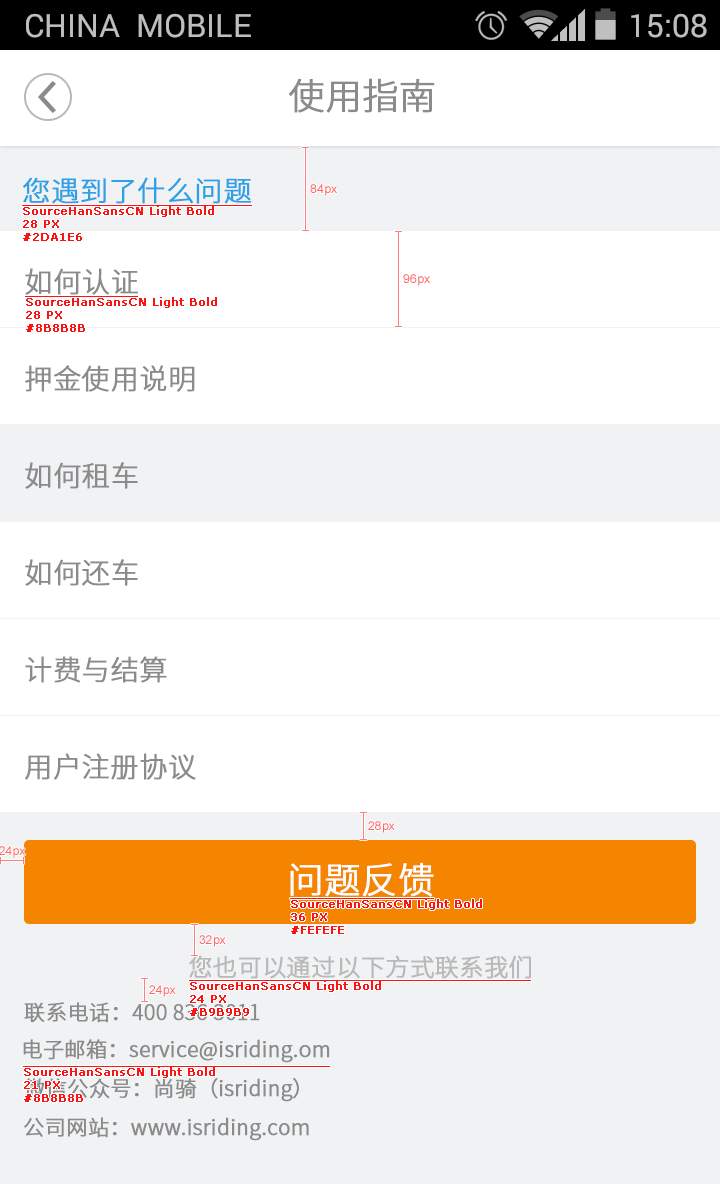
<style>
.page{position:relative;width:720px;height:1184px;background:#ffffff}
.page>*{position:absolute;margin:0}
.t1{font:30px "SourceHanSansCN-Light";font-weight:bold}
.t2{font:36px "SourceHanSansCN-Light";color:#8b8b8b;font-weight:bold}
.t3{font:28px "SourceHanSansCN-Light";color:#2da1e6;font-weight:bold}
.t4{font:11px "Verdana";color:#fc1313;font-weight:bold}
.t5{font:28px "SourceHanSansCN-Light";color:#8b8b8b;font-weight:bold}
.t6{font:36px "SourceHanSansCN-Light";color:#fefefe;font-weight:bold}
.t7{font:24px "SourceHanSansCN-Light";color:#b9b9b9;font-weight:bold}
.t8{font:21px "SourceHanSansCN-Light";color:#8b8b8b;font-weight:bold}
</style>
<div class="page">
<p class="t1" style="left:631px;top:13px;width:73px;height:24px">15:08</p>
<p class="t2" style="left:288px;top:78px;width:147px;height:35px">使用指南</p>
<p class="t3" style="left:22px;top:177px;width:230px;height:27px">您遇到了什么问题</p>
<p class="t4" style="left:23px;top:206px;width:191px;height:35px">SourceHanSansCN Light Bold<br>28 PX<br>#2DA1E6</p>
<p class="t5" style="left:25px;top:268px;width:113px;height:27px">如何认证</p>
<p class="t4" style="left:26px;top:297px;width:191px;height:35px">SourceHanSansCN Light Bold<br>28 PX<br>#8B8B8B</p>
<p class="t5" style="left:25px;top:365px;width:170px;height:27px">押金使用说明</p>
<p class="t5" style="left:25px;top:462px;width:113px;height:27px">如何租车</p>
<p class="t5" style="left:25px;top:559px;width:113px;height:27px">如何还车</p>
<p class="t5" style="left:25px;top:656px;width:142px;height:27px">计费与结算</p>
<p class="t5" style="left:25px;top:753px;width:171px;height:27px">用户注册协议</p>
<p class="t6" style="left:290px;top:862px;width:144px;height:35px">问题反馈</p>
<p class="t4" style="left:291px;top:899px;width:191px;height:35px">SourceHanSansCN Light Bold<br>36 PX<br>#FEFEFE</p>
<p class="t7" style="left:189px;top:955px;width:342px;height:24px">您也可以通过以下方式联系我们</p>
<p class="t4" style="left:190px;top:981px;width:191px;height:35px">SourceHanSansCN Light Bold<br>24 PX<br>#B9B9B9</p>
<p class="t8" style="left:24px;top:1002px;width:236px;height:21px">联系电话：400 836 3011</p>
<p class="t8" style="left:23px;top:1039px;width:307px;height:24px">电子邮箱：service@isriding.om</p>
<p class="t4" style="left:24px;top:1067px;width:191px;height:35px">SourceHanSansCN Light Bold<br>21 PX<br>#8B8B8B</p>
<p class="t8" style="left:24px;top:1078px;width:275px;height:24px">微信公众号：尚骑（isriding）</p>
<p class="t8" style="left:24px;top:1117px;width:285px;height:24px">公司网站：www.isriding.com</p>
</div>
